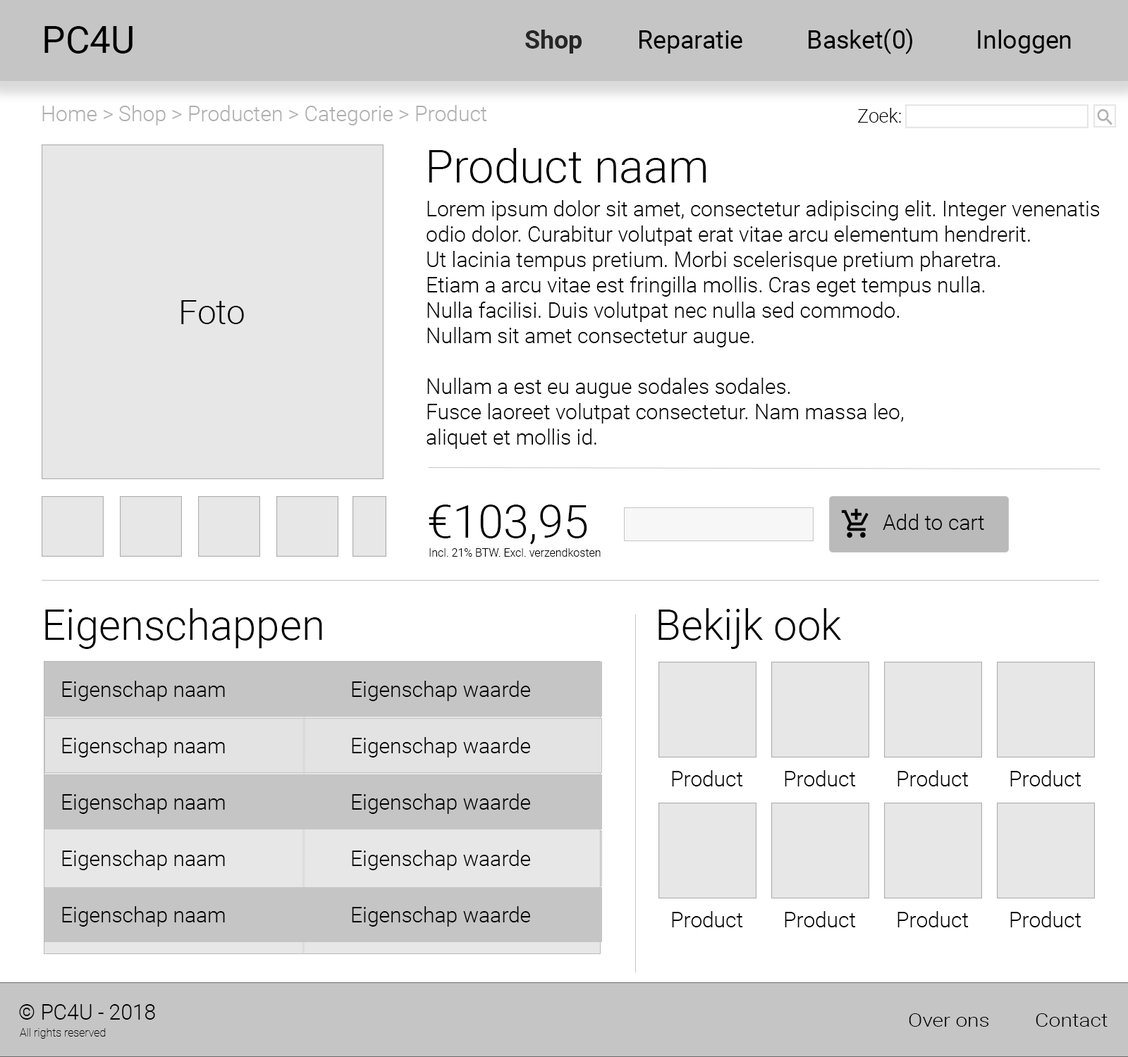
<style>
.page{position:relative;width:1128px;height:1057px;background:#ffffff}
.page>*{position:absolute;margin:0}
.t1{font:37.6px "Roboto-Regular";color:#000000}
.t2{font:25.1px "Roboto-Regular";color:#000000}
.t3{font:25.1px "Roboto-Bold";color:#262626}
.t4{font:21.1px "Roboto-Light";color:#afafaf}
.t5{font:18.8px "Roboto-Light";color:#000000}
.t6{font:45.8px "Roboto-Light";color:#000000}
.t7{font:21.1px "Roboto-Light";color:#000000}
.t8{font:33.8px "Roboto-Light";color:#000000}
.t9{font:11.3px "Roboto-Light";color:#000000}
.t10{font:42.3px "Roboto-Light";color:#000000}
.t11{font:18.2px "Roboto-Light";color:#000000;scale:1.16 1}
.t12{font:11.3px "Roboto-Thin";color:#000000}
</style>
<div class="page">
<p class="t1" style="left:44px;top:26px;width:89px;height:28px">PC4U</p>
<p class="t2" style="left:525px;top:28px;width:546px;height:26px"><span class="t3">Shop</span>  Reparatie   Basket(0)   Inloggen</p>
<p class="t4" style="left:42px;top:105px;width:445px;height:20px">Home &gt; Shop &gt; Producten &gt; Categorie &gt; Product</p>
<p class="t5" style="left:858px;top:108px;width:43px;height:15px">Zoek:</p>
<p class="t6" style="left:429px;top:148px;width:277px;height:35px">Product naam</p>
<p class="t7" style="left:426px;top:200px;width:674px;height:249px">Lorem ipsum dolor sit amet, consectetur adipiscing elit. Integer venenatis <br>odio dolor. Curabitur volutpat erat vitae arcu elementum hendrerit. <br>Ut lacinia tempus pretium. Morbi scelerisque pretium pharetra. <br>Etiam a arcu vitae est fringilla mollis. Cras eget tempus nulla. <br>Nulla facilisi. Duis volutpat nec nulla sed commodo. <br>Nullam sit amet consectetur augue.<br><br>Nullam a est eu augue sodales sodales. <br>Fusce laoreet volutpat consectetur. Nam massa leo, <br>aliquet et mollis id.</p>
<p class="t8" style="left:181px;top:300px;width:63px;height:24px">Foto</p>
<p class="t6" style="left:429px;top:505px;width:158px;height:40px">€103,95</p>
<p class="t7" style="left:883px;top:514px;width:101px;height:16px">Add to cart</p>
<p class="t9" style="left:429px;top:548px;width:172px;height:9px">Incl. 21% BTW. Excl. verzendkosten</p>
<p class="t10" style="left:45px;top:608px;width:277px;height:41px">Eigenschappen</p>
<p class="t10" style="left:658px;top:608px;width:184px;height:41px">Bekijk ook</p>
<p class="t7" style="left:62px;top:681px;width:163px;height:20px">Eigenschap naam</p>
<p class="t7" style="left:352px;top:681px;width:178px;height:20px">Eigenschap waarde</p>
<p class="t7" style="left:62px;top:737px;width:163px;height:21px">Eigenschap naam</p>
<p class="t7" style="left:352px;top:737px;width:178px;height:21px">Eigenschap waarde</p>
<p class="t7" style="left:672px;top:770px;width:71px;height:17px">Product</p>
<p class="t7" style="left:785px;top:770px;width:71px;height:17px">Product</p>
<p class="t7" style="left:897px;top:770px;width:71px;height:17px">Product</p>
<p class="t7" style="left:1010px;top:770px;width:71px;height:17px">Product</p>
<p class="t7" style="left:62px;top:794px;width:163px;height:20px">Eigenschap naam</p>
<p class="t7" style="left:352px;top:794px;width:178px;height:20px">Eigenschap waarde</p>
<p class="t7" style="left:62px;top:850px;width:163px;height:21px">Eigenschap naam</p>
<p class="t7" style="left:352px;top:850px;width:178px;height:21px">Eigenschap waarde</p>
<p class="t7" style="left:62px;top:906px;width:163px;height:21px">Eigenschap naam</p>
<p class="t7" style="left:352px;top:906px;width:178px;height:21px">Eigenschap waarde</p>
<p class="t7" style="left:672px;top:911px;width:71px;height:17px">Product</p>
<p class="t7" style="left:785px;top:911px;width:71px;height:17px">Product</p>
<p class="t7" style="left:897px;top:911px;width:71px;height:17px">Product</p>
<p class="t7" style="left:1010px;top:911px;width:71px;height:17px">Product</p>
<p class="t7" style="left:19px;top:1004px;width:136px;height:16px">© PC4U - 2018</p>
<p class="t11" style="left:909px;top:1014px;width:198px;height:13px">Over ons  Contact</p>
<p class="t12" style="left:20px;top:1028px;width:86px;height:11px">All rights reserved</p>
</div>
